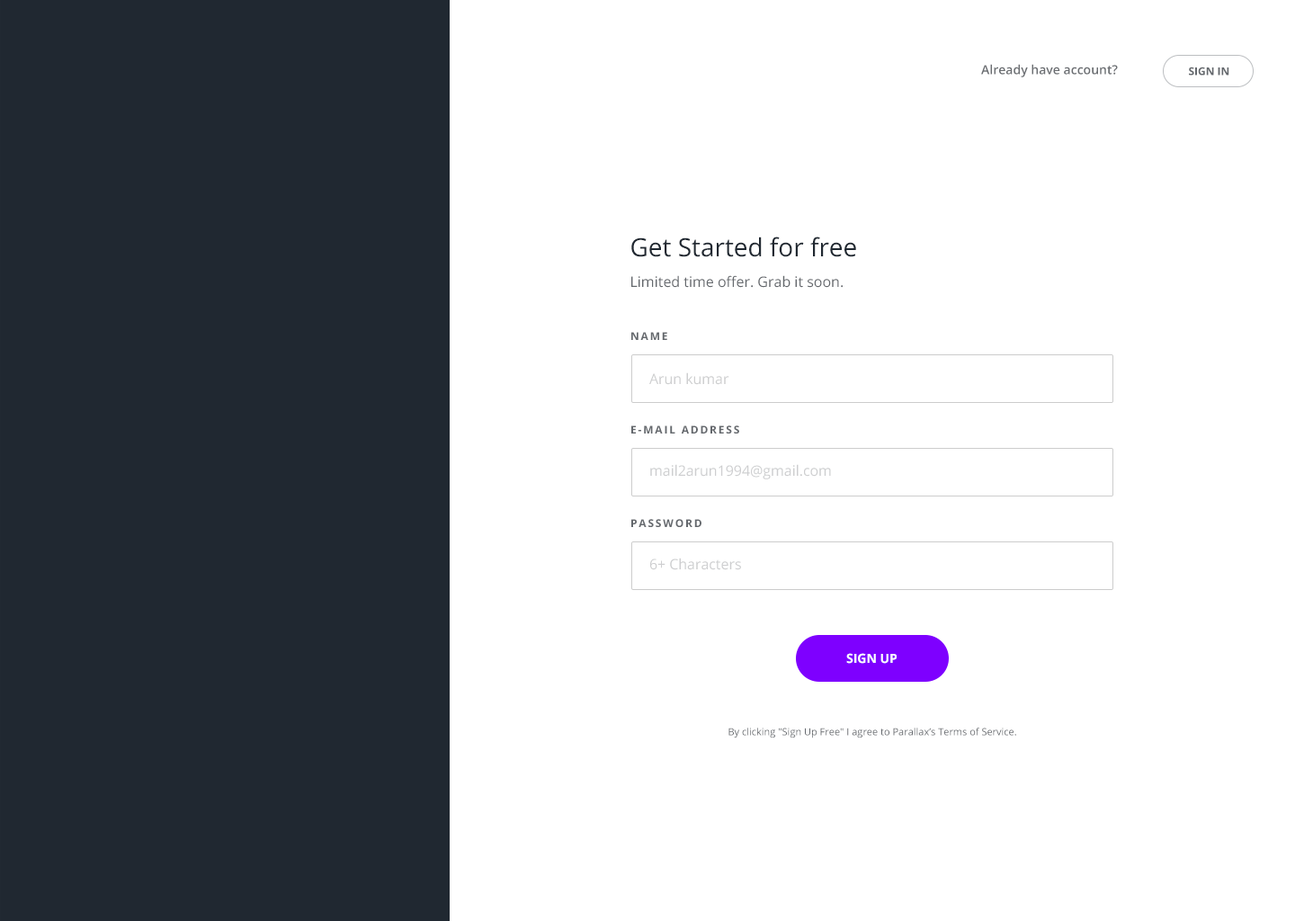
<style>
.page{position:relative;width:1295px;height:921px;background:#ffffff}
.page>*{position:absolute;margin:0}
.t1{font:12.6px "OpenSans-Semibold";color:#6a6d71}
.t2{font:10.8px "OpenSans-Bold";color:#64686d}
.t3{font:25.2px "OpenSans";color:#202831}
.t4{font:14.4px "OpenSans";color:#64686d}
.t5{font:10.9px "OpenSans-Bold";letter-spacing:0.15em;color:#64686d}
.t6{font:14.4px "OpenSans";color:#cecfd0}
.t7{font:14.4px "OpenSans";color:#ceced0}
.t8{font:12.6px "OpenSans-Bold";color:#ffffff}
.t9{font:9.9px "OpenSans";color:#64686d}
</style>
<div class="page">
<p class="t1" style="left:981px;top:64px;width:137px;height:13px">Already have account?</p>
<p class="t2" style="left:1189px;top:67px;width:40px;height:9px">SIGN IN</p>
<p class="t3" style="left:631px;top:237px;width:225px;height:20px">Get Started for free</p>
<p class="t4" style="left:631px;top:275px;width:212px;height:13px">Limited time offer. Grab it soon.</p>
<p class="t5" style="left:631px;top:332px;width:36px;height:8px">NAME</p>
<p class="t6" style="left:649px;top:372px;width:80px;height:13px">Arun kumar</p>
<p class="t5" style="left:631px;top:425px;width:108px;height:8px">E-MAIL ADDRESS</p>
<p class="t7" style="left:650px;top:464px;width:181px;height:15px">mail2arun1994@gmail.com</p>
<p class="t5" style="left:631px;top:519px;width:70px;height:8px">PASSWORD</p>
<p class="t7" style="left:650px;top:558px;width:91px;height:12px">6+ Characters</p>
<p class="t8" style="left:846px;top:653px;width:51px;height:11px">SIGN UP</p>
<p class="t9" style="left:728px;top:728px;width:288px;height:10px">By clicking "Sign Up Free" I agree to Parallax’s Terms of Service.</p>
</div>
